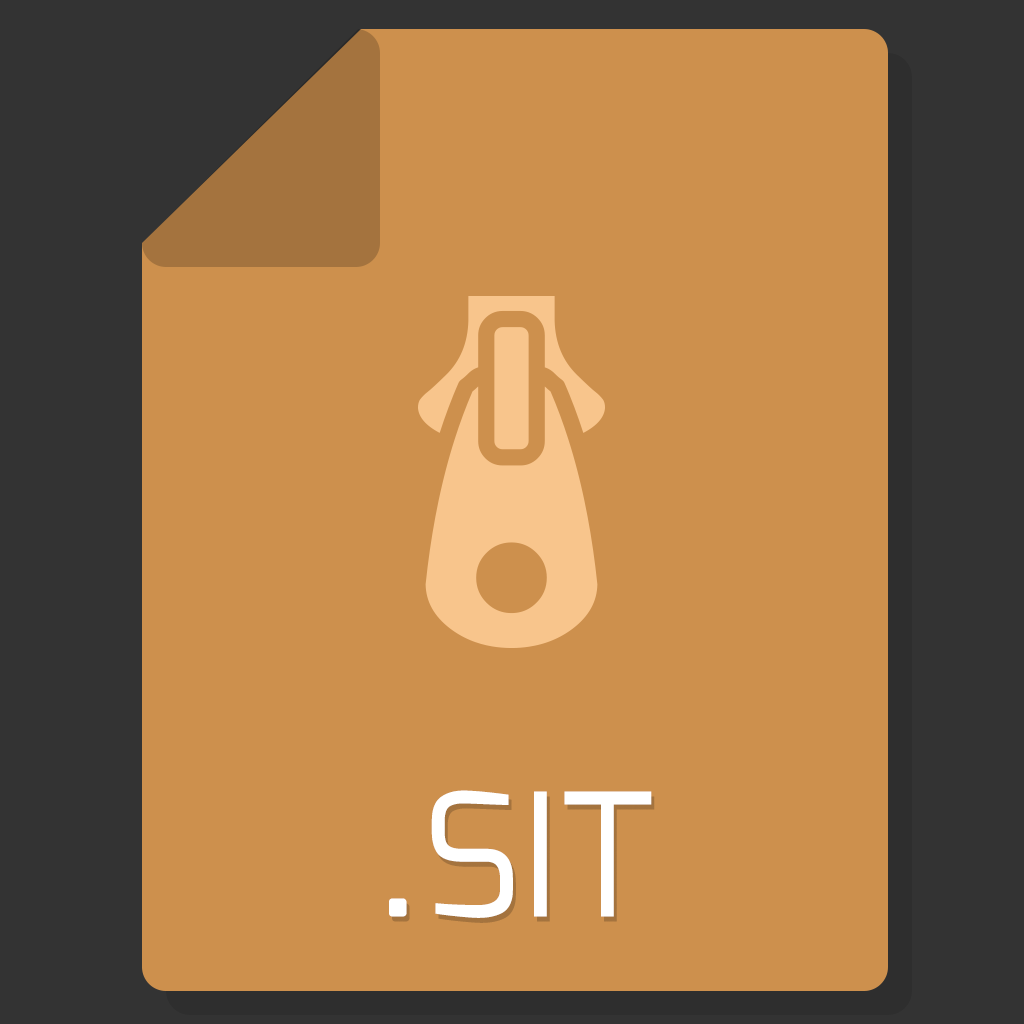
<style>
.page{position:relative;width:1024px;height:1024px;background:#cd904d}
.page>*{position:absolute;margin:0}
.t1{font:170.3px "Exo-Regular";color:#ffffff}
</style>
<div class="page">
<p class="t1" style="left:389px;top:790px;width:263px;height:128px">.SIT</p>
</div>
